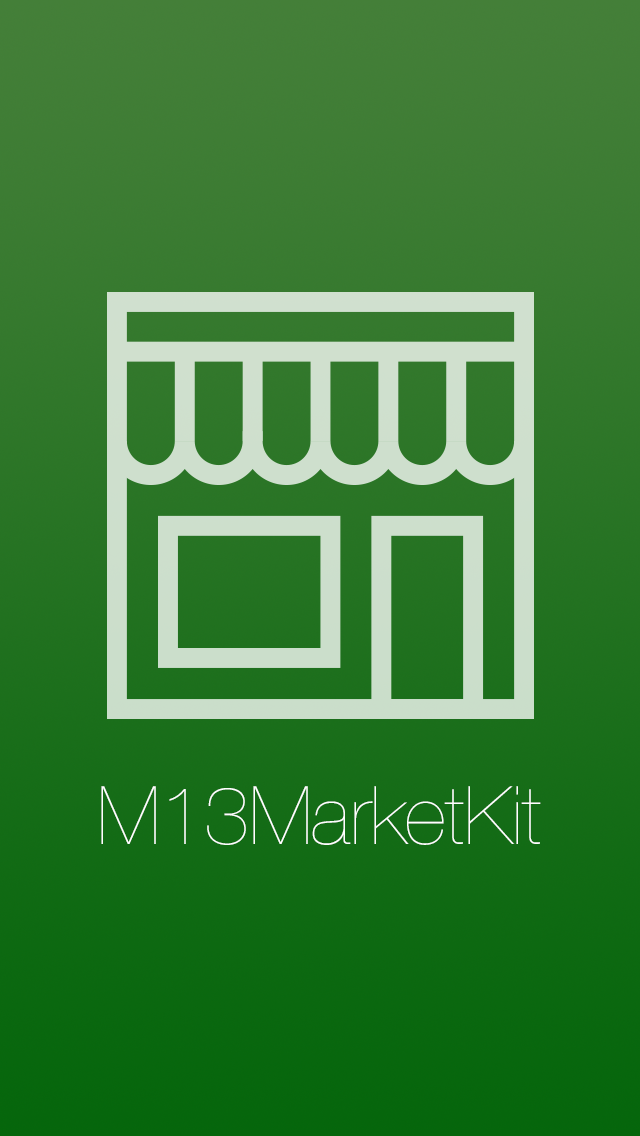
<style>
.page{position:relative;width:640px;height:1136px}
.page>*{position:absolute;margin:0}
.t1{font:81.1px "HelveticaNeue-UltraLight";letter-spacing:-0.007em;color:#ffffff}
</style>
<div class="page">
<p class="t1" style="left:101px;top:786px;width:440px;height:59px">M13MarketKit</p>
</div>
